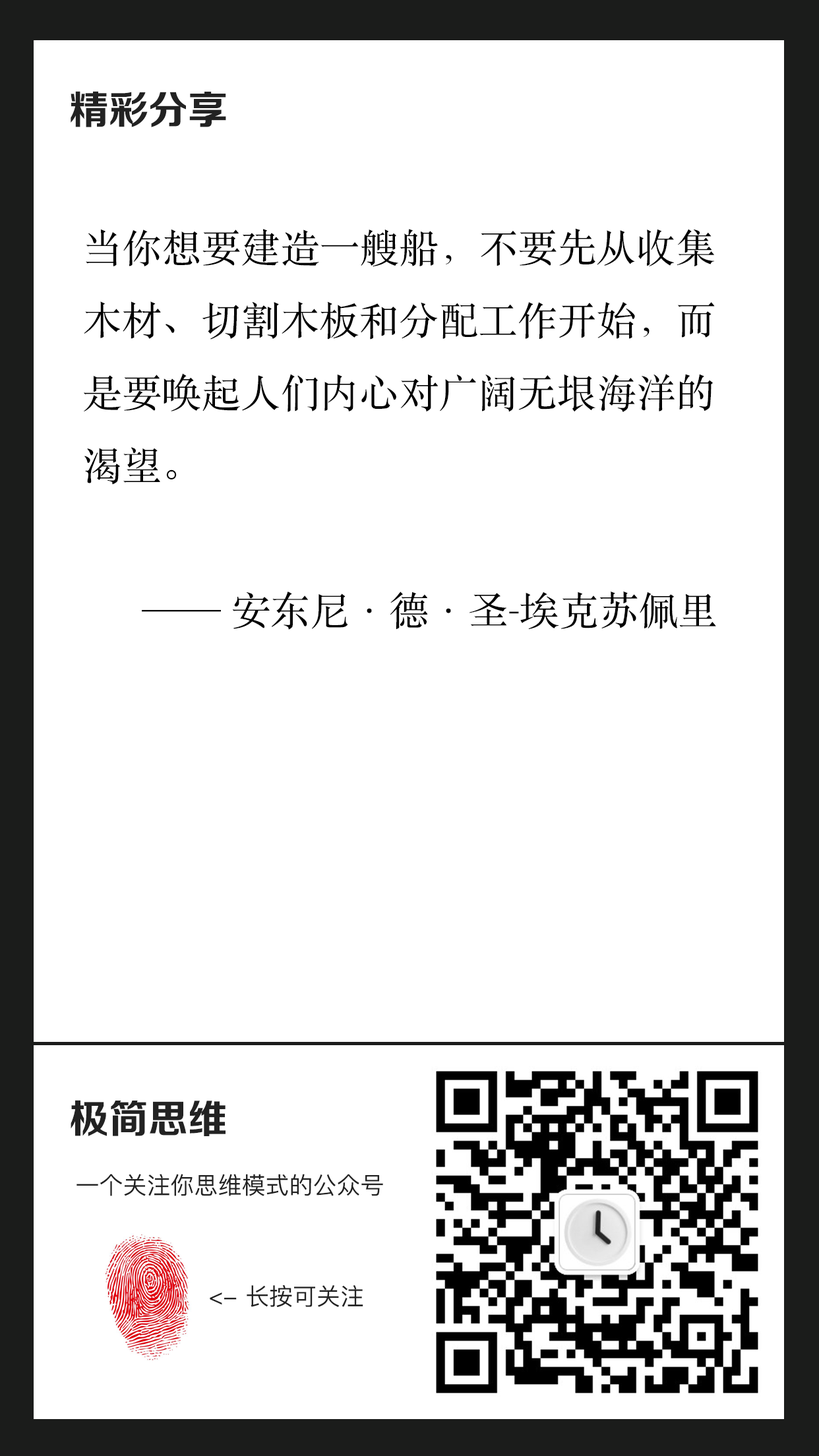
<style>
.page{position:relative;width:819px;height:1456px;background:#ffffff}
.page>*{position:absolute;margin:0}
.t1{font:39.6px "FZZCHJW--GB1-0";color:#222222}
.t2{font:39.6px/72.5px "STSongti-SC-Regular";color:#000000}
.t3{font:23.7px "PingFangSC-Regular";color:#222222}
</style>
<div class="page">
<p class="t1" style="left:71px;top:91px;width:155px;height:36px">精彩分享</p>
<p class="t2" style="left:84px;top:228px;width:632px;height:402px">当你想要建造一艘船，不要先从收集<br>木材、切割木板和分配工作开始，而<br>是要唤起人们内心对广阔无垠海洋的<br>渴望。<br><br>      —— 安东尼·德·圣-埃克苏佩里</p>
<p class="t1" style="left:71px;top:1100px;width:155px;height:36px">极简思维</p>
<p class="t3" style="left:76px;top:1174px;width:307px;height:22px">一个关注你思维模式的公众号</p>
<p class="t3" style="left:210px;top:1285px;width:153px;height:23px">&lt;- 长按可关注</p>
</div>
